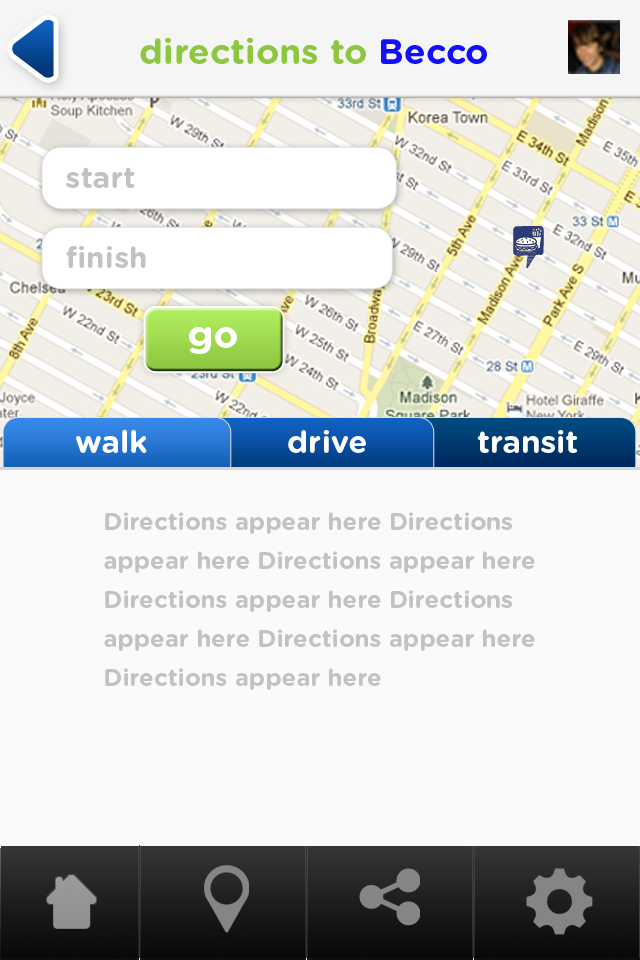
<style>
.page{position:relative;width:640px;height:960px;background:#fafaf9}
.page>*{position:absolute;margin:0}
.t1{font:35.5px "GothamRounded-Bold";color:#8dc63f}
.t2{font:35.5px "GothamRounded-Bold";color:#1010fe}
.t3{font:30px/80px "GothamRounded-Bold";color:#c2c2c2}
.t4{font:38.9px "GothamRounded-Bold";color:#ffffff}
.t5{font:31.2px "GothamRounded-Bold";color:#ffffff}
.t6{font:24px/39.2px "GothamRounded-Bold";color:#c2c2c2}
</style>
<div class="page">
<p class="t1" style="left:140px;top:37px;width:347px;height:27px">directions to <span class="t2">Becco</span></p>
<p class="t3" style="left:66px;top:167px;width:80px;height:101px">start<br>finish</p>
<p class="t4" style="left:189px;top:327px;width:48px;height:27px">go</p>
<p class="t5" style="left:76px;top:429px;width:71px;height:24px">walk</p>
<p class="t5" style="left:288px;top:430px;width:78px;height:23px">drive</p>
<p class="t5" style="left:477px;top:430px;width:100px;height:23px">transit</p>
<p class="t6" style="left:104px;top:512px;width:431px;height:178px">Directions appear here Directions appear here Directions appear here Directions appear here Directions appear here Directions appear here Directions appear here</p>
</div>
